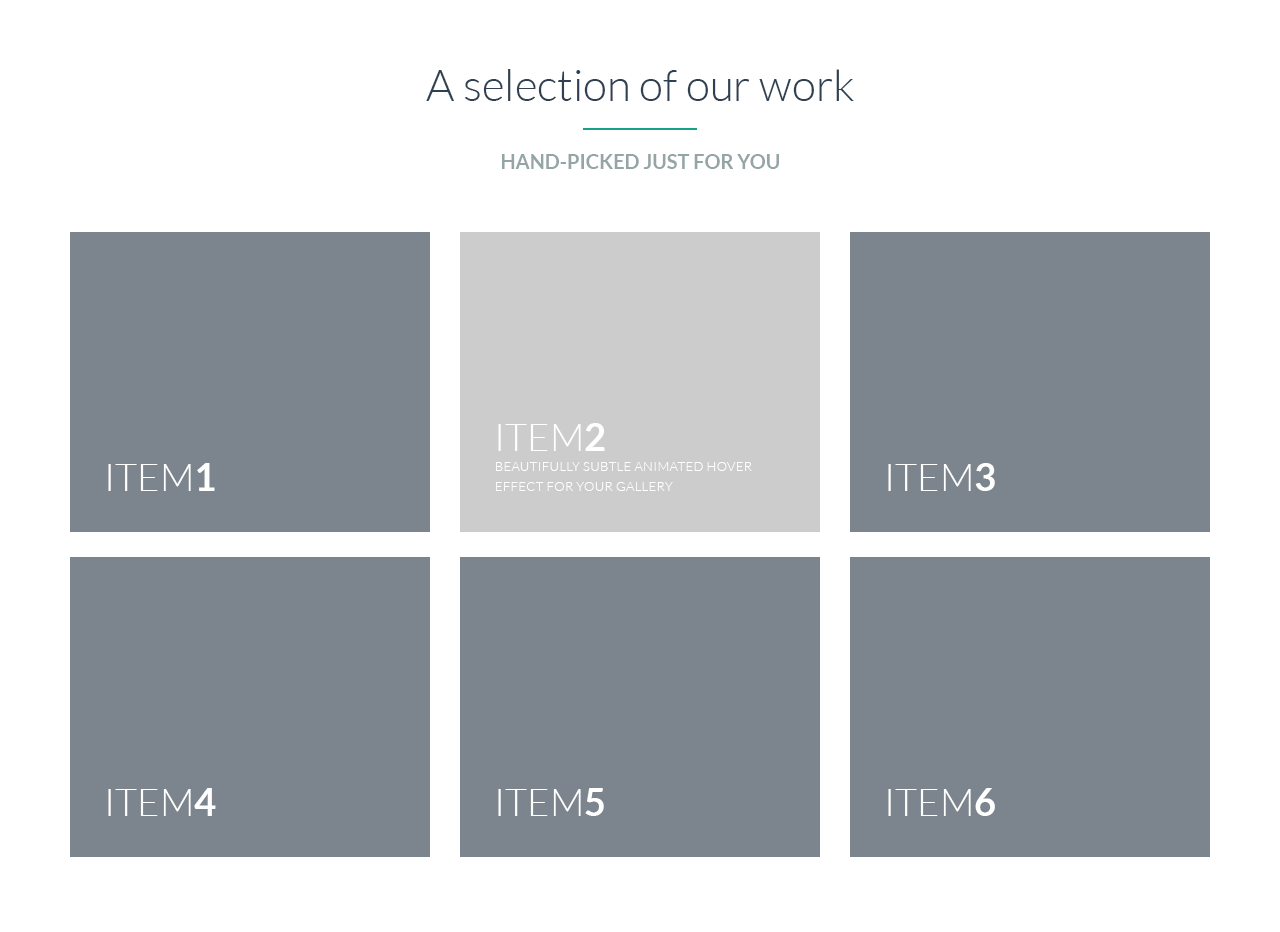
<style>
.page{position:relative;width:1280px;height:932px;background:#7c858e}
.page>*{position:absolute;margin:0}
.t1{font:44px "Lato-Light";color:#2e4052}
.t2{font:20px "Lato-Bold";color:#95a5a6}
.t3{font:38px "Lato-Light";color:#ffffff}
.t4{font:38px "Lato-Bold";color:#ffffff}
.t5{font:13px/20px "Lato-Light";letter-spacing:0.025em;color:#ffffff}
</style>
<div class="page">
<p class="t1" style="left:426px;top:69px;width:428px;height:32px">A selection of our work</p>
<p class="t2" style="left:502px;top:154px;width:277px;height:15px">HAND-PICKED JUST FOR YOU</p>
<p class="t3" style="left:498px;top:423px;width:107px;height:28px">ITEM<span class="t4">2</span></p>
<p class="t5" style="left:496px;top:462px;width:256px;height:29px">BEAUTIFULLY SUBTLE ANIMATED HOVER<br>EFFECT FOR YOUR GALLERY</p>
<p class="t3" style="left:108px;top:463px;width:107px;height:28px">ITEM<span class="t4">1</span></p>
<p class="t3" style="left:888px;top:463px;width:107px;height:28px">ITEM<span class="t4">3</span></p>
<p class="t3" style="left:108px;top:788px;width:108px;height:28px">ITEM<span class="t4">4</span></p>
<p class="t3" style="left:498px;top:788px;width:106px;height:28px">ITEM<span class="t4">5</span></p>
<p class="t3" style="left:888px;top:788px;width:107px;height:28px">ITEM<span class="t4">6</span></p>
</div>
